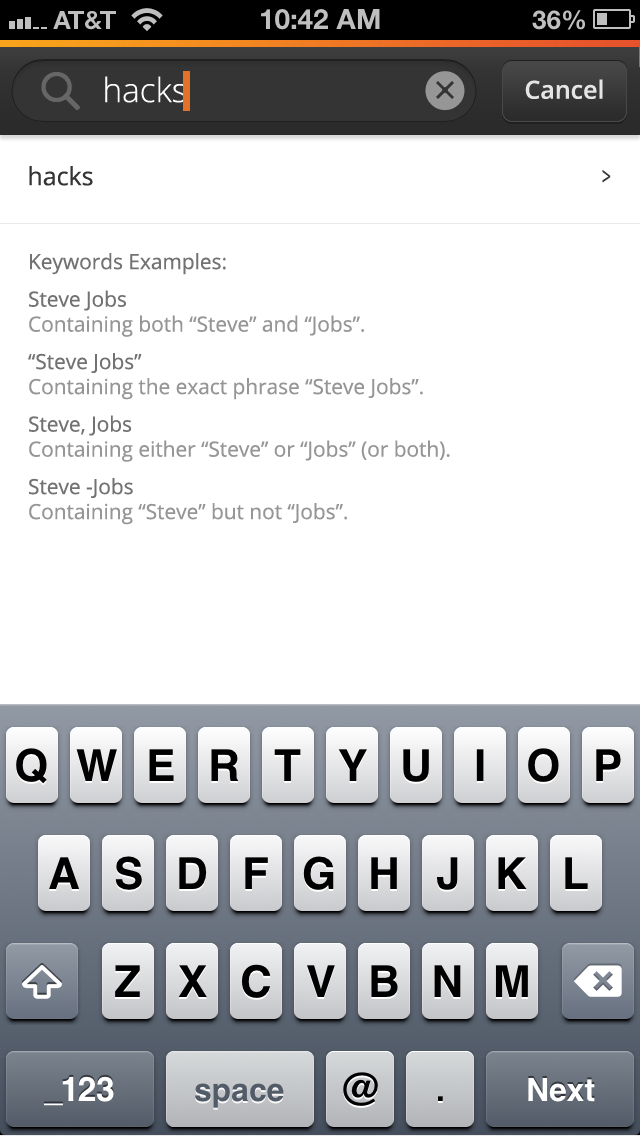
<style>
.page{position:relative;width:640px;height:1136px;background:#ffffff}
.page>*{position:absolute;margin:0}
.t1{font:33.3px "OpenSans-Light";color:#ffffff}
.t2{font:25px "OpenSans-Semibold";color:#e5e5e5}
.t3{font:25px "OpenSans";color:#343434}
.t4{font:25px "OpenSans";color:#343434;scale:0.64 1}
.t5{font:20.8px/25px "OpenSans";color:#969696}
.t6{font:20.8px/25px "OpenSans";color:#727272}
</style>
<div class="page">
<p class="t1" style="left:105px;top:76px;width:81px;height:27px">hacks</p>
<p class="t2" style="left:525px;top:79px;width:78px;height:20px">Cancel</p>
<p class="t3" style="left:29px;top:166px;width:64px;height:20px">hacks</p>
<p class="t4" style="left:602px;top:170px;width:9px;height:13px">&gt;</p>
<p class="t5" style="left:28px;top:253px;width:422px;height:272px"><span class="t6">Keywords Examples:<br>Steve Jobs<br></span>Containing both “Steve” and “Jobs”.<br><span class="t6">“Steve Jobs”<br></span>Containing the exact phrase “Steve Jobs”.<br><span class="t6">Steve, Jobs<br></span>Containing either “Steve” or “Jobs” (or both).<br><span class="t6">Steve -Jobs<br></span>Containing “Steve” but not “Jobs”.</p>
</div>
